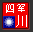
<style>
.page{position:relative;width:33px;height:32px;background:#f20000}
.page>*{position:absolute;margin:0}
.t1{font:10.4px "SimSun";color:#ffffff}
.t2{font:11.7px "SimSun";color:#ffffff}
</style>
<div class="page">
<p class="t1" style="left:6px;top:4px;width:19px;height:9px">四军</p>
<p class="t2" style="left:16px;top:15px;width:11px;height:12px">川</p>
</div>
